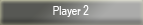
<style>
.page{position:relative;width:143px;height:25px}
.page>*{position:absolute;margin:0}
.t1{font:12px "ArialNarrow";color:#fefefe}
</style>
<div class="page">
<p class="t1" style="left:53px;top:5px;width:36px;height:12px">Player 2</p>
</div>
